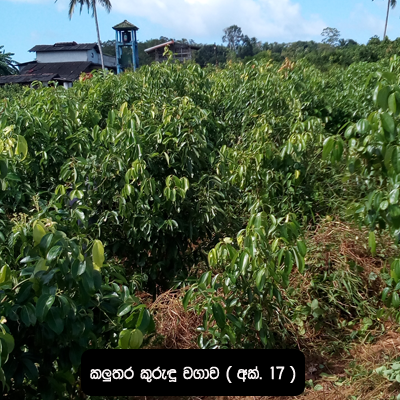
<style>
.page{position:relative;width:400px;height:400px}
.page>*{position:absolute;margin:0}
.t1{font:18px "0KDSAMAN";color:#faf5f5}
</style>
<div class="page">
<p class="t1" style="left:90px;top:366px;width:206px;height:17px">l¨;r l=reª j.dj ^ wla’ 17 &amp;</p>
</div>
